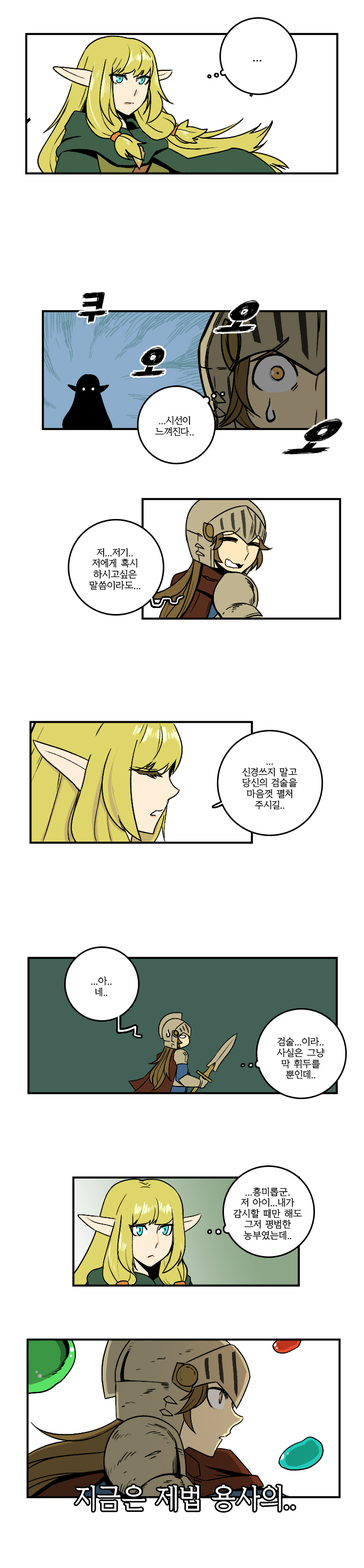
<style>
.page{position:relative;width:364px;height:1568px;background:#ffffff}
.page>*{position:absolute;margin:0}
.t1{font:12.1px "KoreanYMJ-B";color:#000000}
.t2{font:9.1px "KoreanYMJ-B";color:#000000}
.t3{font:26.5px "KoreanYMJ-B";color:#ffffff;scale:0.93 1}
</style>
<div class="page">
<p class="t1" style="left:253px;top:60px;width:9px;height:2px">...</p>
<p class="t2" style="left:155px;top:416px;width:39px;height:21px;text-align:center">...시선이<br>느껴진다..</p>
<p class="t2" style="left:89px;top:548px;width:52px;height:42px;text-align:center">저...저기..<br>저에게 혹시<br>하시고싶은<br>말씀이라도...</p>
<p class="t2" style="left:242px;top:763px;width:55px;height:47px;text-align:center">...<br>신경쓰지 말고<br>당신의 검술을<br>마음껏 펼처<br>주시길..</p>
<p class="t2" style="left:91px;top:976px;width:21px;height:21px;text-align:center">...아..<br>네..</p>
<p class="t2" style="left:277px;top:1037px;width:48px;height:42px;text-align:center">검술...이라..<br>사실은 그냥<br>막 휘두를<br>뿐인데..</p>
<p class="t2" style="left:233px;top:1187px;width:69px;height:53px;text-align:center">...흥미롭군.<br>저 아이...내가<br>감시할 때만 해도<br>그저 평범한<br>농부였는데..</p>
<p class="t3" style="left:75px;top:1485px;width:220px;height:26px">지금은 제법 용사의..</p>
</div>
